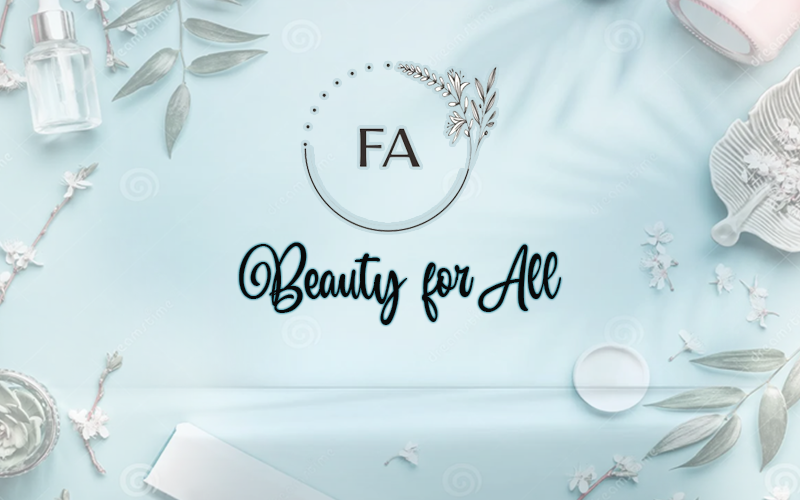
<style>
.page{position:relative;width:800px;height:500px}
.page>*{position:absolute;margin:0}
.t1{font:84px "BlantickScript";color:#090909;scale:0.9 1}
</style>
<div class="page">
<p class="t1" style="left:239px;top:242px;width:322px;height:83px">Beauty for All</p>
</div>
